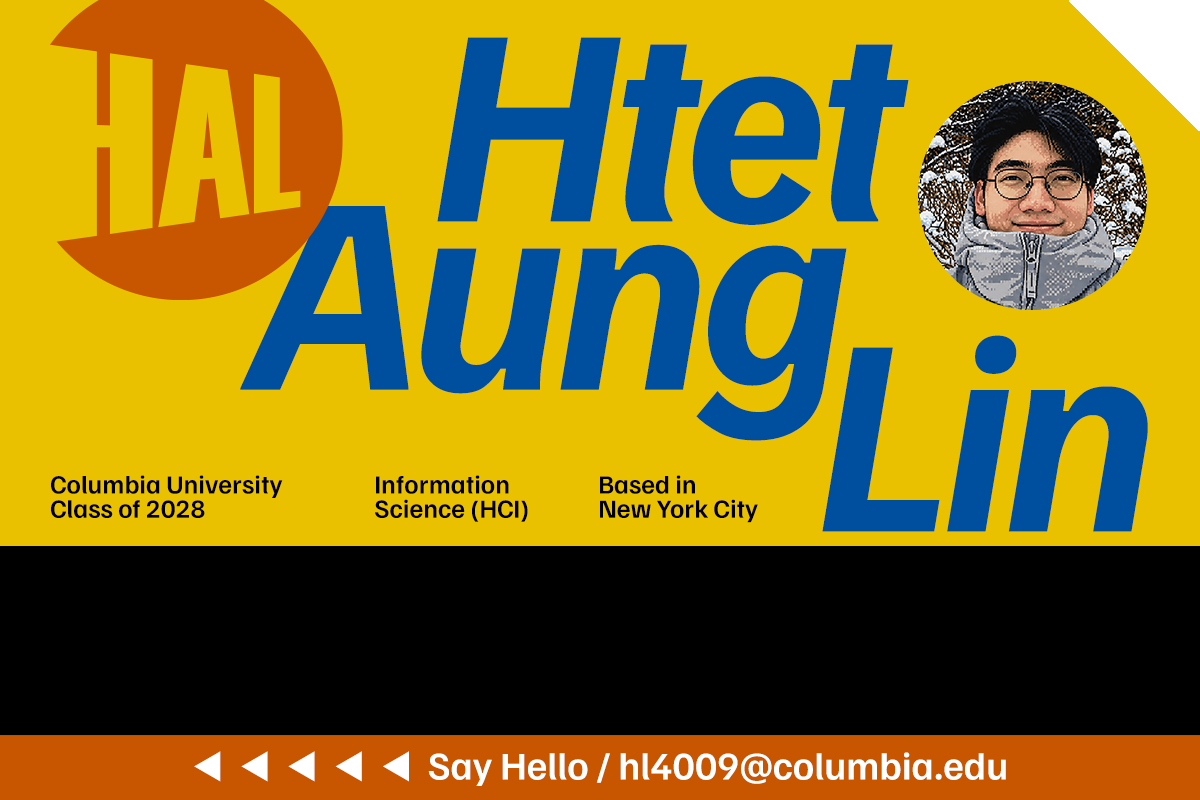
<style>
.page{position:relative;width:1200px;height:800px;background:#eac100}
.page>*{position:absolute;margin:0}
.t1{font:282.5px "FamiljenGrotesk-BoldItalic";letter-spacing:-0.04em;color:#004f9e}
.t2{font:26.3px/24.3px "FamiljenGrotesk-SemiBold";color:#000000}
.t3{font:39.3px "FamiljenGrotesk-SemiBold";color:#ffffff}
</style>
<div class="page">
<p class="t1" style="left:437px;top:37px;width:472px;height:188px">Htet</p>
<p class="t1" style="left:240px;top:206px;width:607px;height:235px">Aung</p>
<p class="t1" style="left:822px;top:335px;width:326px;height:197px">Lin</p>
<p class="t2" style="left:51px;top:475px;width:232px;height:43px">Columbia University<br>Class of 2028</p>
<p class="t2" style="left:375px;top:475px;width:153px;height:47px">Information<br>Science (HCI)</p>
<p class="t2" style="left:600px;top:475px;width:158px;height:48px">Based in<br>New York City</p>
<p class="t3" style="left:194px;top:751px;width:812px;height:35px">◀  ◀  ◀  ◀  ◀  Say Hello / hl4009@columbia.edu</p>
</div>
